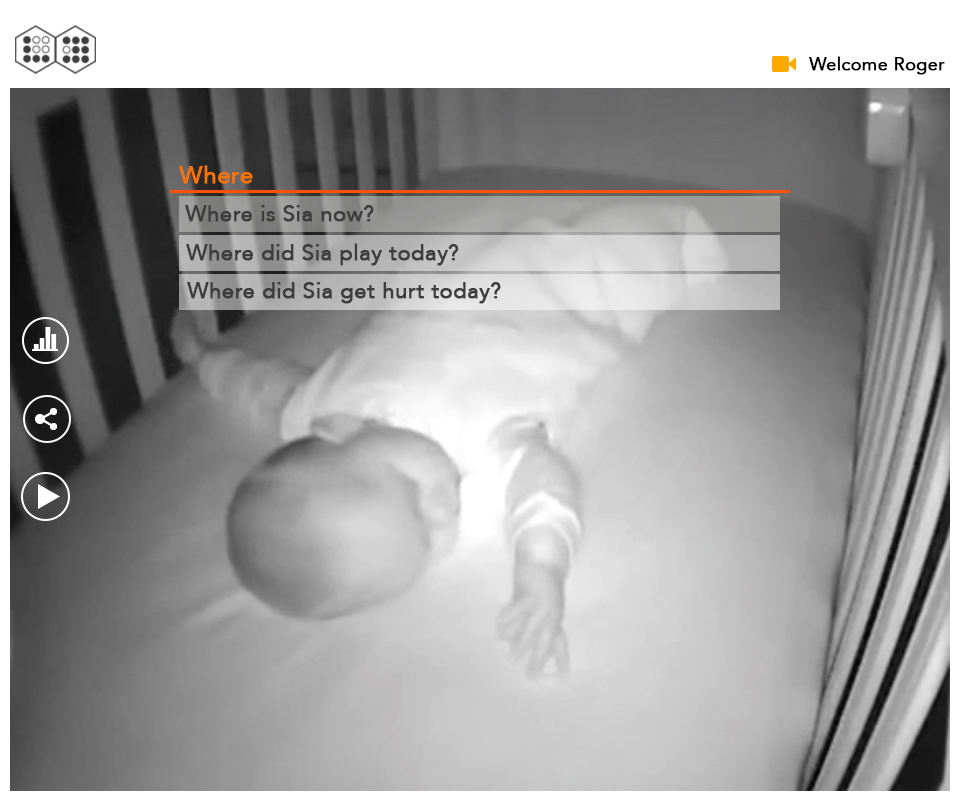
<style>
.page{position:relative;width:960px;height:800px}
.page>*{position:absolute;margin:0}
.t1{font:18px "Avenir-Roman";color:#000000;font-weight:bold}
.t2{font:24px "Avenir-Roman";color:#ff7400;font-weight:bold}
.t3{font:22px "Avenir-Roman";color:#3d3d3d;font-weight:bold}
</style>
<div class="page">
<p class="t1" style="left:809px;top:56px;width:136px;height:19px">Welcome Roger</p>
<p class="t2" style="left:179px;top:165px;width:74px;height:19px">Where</p>
<p class="t3" style="left:185px;top:205px;width:189px;height:17px">Where is Sia now?</p>
<p class="t3" style="left:186px;top:243px;width:273px;height:23px">Where did Sia play today?</p>
<p class="t3" style="left:187px;top:282px;width:314px;height:22px">Where did Sia get hurt today?</p>
</div>
